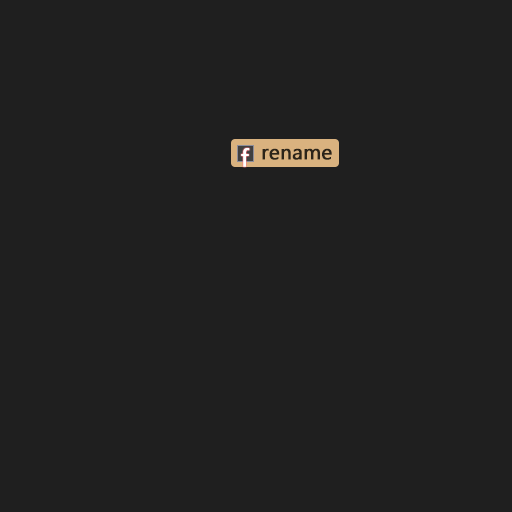
<style>
.page{position:relative;width:512px;height:512px;background:#1f1f1f}
.page>*{position:absolute;margin:0}
.t1{font:24.7px "SegoeUI";color:#ffffff;font-weight:bold}
.t2{font:20.5px "SegoeUI";color:#2b2419;font-weight:bold}
</style>
<div class="page">
<p class="t1" style="left:241px;top:148px;width:9px;height:19px">f</p>
<p class="t2" style="left:262px;top:148px;width:70px;height:12px">rename</p>
</div>
